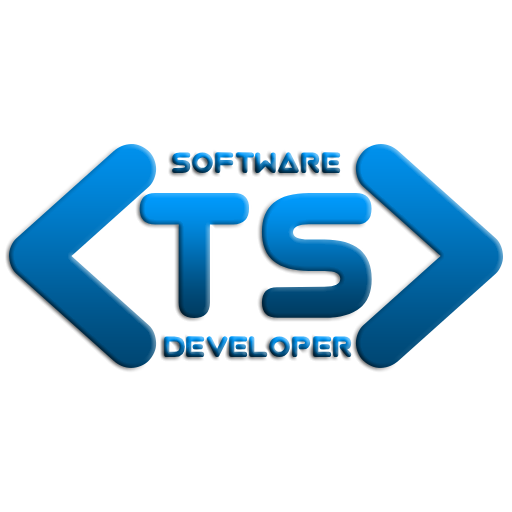
<style>
.page{position:relative;width:512px;height:512px;background:#ffffff}
.page>*{position:absolute;margin:0}
.t1{font:33px "Virgo01"}
.t2{font:200px "Virgo01"}
</style>
<div class="page">
<p class="t1" style="left:172px;top:152px;width:169px;height:22px">SOFTWARE</p>
<p class="t2" style="left:139px;top:192px;width:233px;height:126px">TS</p>
<p class="t1" style="left:164px;top:336px;width:188px;height:22px">DEVELOPER</p>
</div>
